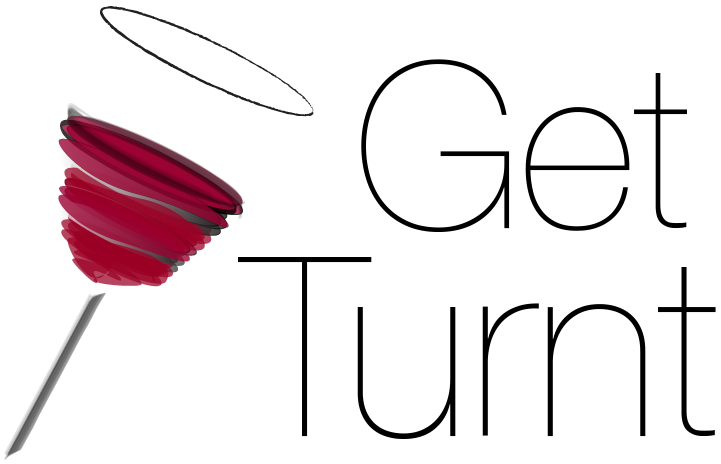
<style>
.page{position:relative;width:721px;height:464px;background:#ffffff}
.page>*{position:absolute;margin:0}
.t1{font:230px "HelveticaNeue-UltraLight";color:#000000}
.t2{font:250px "HelveticaNeue-UltraLight";color:#000000}
</style>
<div class="page">
<p class="t1" style="left:361px;top:59px;width:326px;height:173px">Get</p>
<p class="t2" style="left:238px;top:257px;width:478px;height:182px">Turnt</p>
</div>
